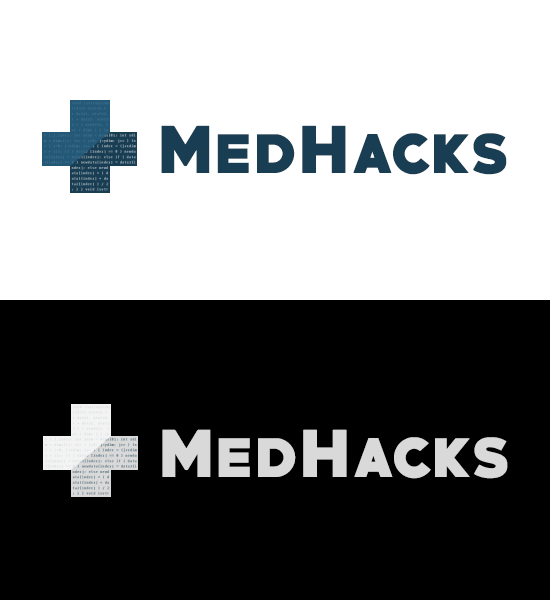
<style>
.page{position:relative;width:550px;height:600px;background:#000000}
.page>*{position:absolute;margin:0}
.t1{font:58px "PRIMETIME-Regular";letter-spacing:0.01em;color:#193e53;font-weight:bold}
.t2{font:60px "PRIMETIME-Regular";letter-spacing:0.01em;color:#193e53;font-weight:bold}
.t3{font:58px "PRIMETIME-Regular";letter-spacing:0.01em;color:#d9d9d9;font-weight:bold}
.t4{font:60px "PRIMETIME-Regular";letter-spacing:0.01em;color:#d9d9d9;font-weight:bold}
</style>
<div class="page">
<p class="t1" style="left:161px;top:125px;width:346px;height:50px"><span class="t2">M</span>ed<span class="t2">H</span>acks</p>
<p class="t3" style="left:162px;top:429px;width:346px;height:50px"><span class="t4">M</span>ed<span class="t4">H</span>acks</p>
</div>
